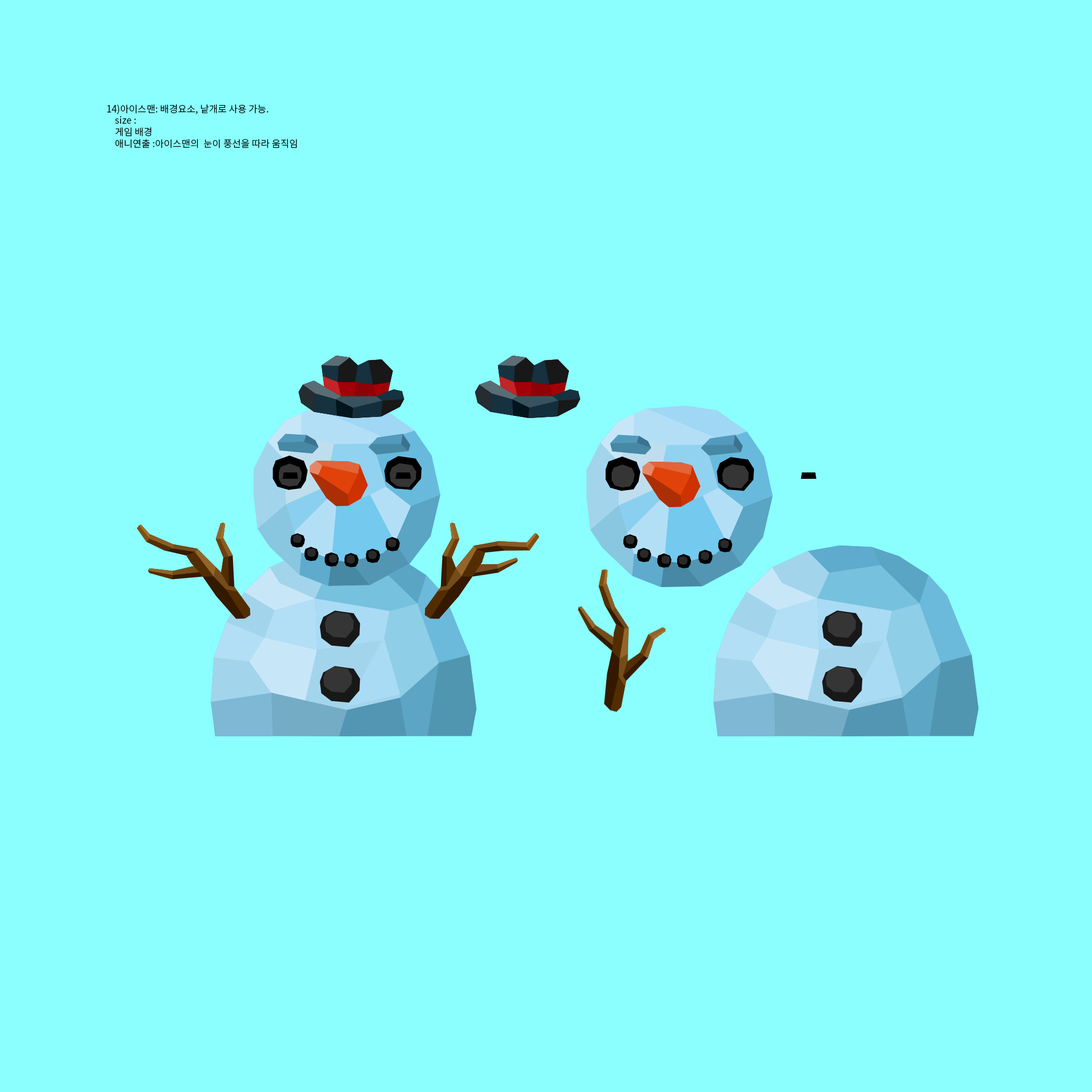
<style>
.page{position:relative;width:1092px;height:1092px;background:#8afffd}
.page>*{position:absolute;margin:0}
.t1{font:9.6px "NotoSansCJKkr-DemiLight";color:#000000}
</style>
<div class="page">
<p class="t1" style="left:107px;top:104px;width:190px;height:44px">14)아이스맨: 배경요소, 낱개로 사용 가능.   <br>    size : <br>    게임 배경<br>    애니연출 :아이스맨의  눈이 풍선을 따라 움직임</p>
</div>
